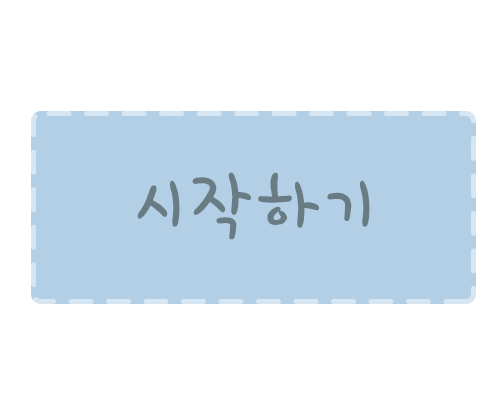
<style>
.page{position:relative;width:500px;height:400px;background:#ffffff}
.page>*{position:absolute;margin:0}
.t1{font:95.3px "HoonWcatR";letter-spacing:0.05em;color:#6a7c83}
</style>
<div class="page">
<p class="t1" style="left:137px;top:172px;width:233px;height:68px">시작하기</p>
</div>
